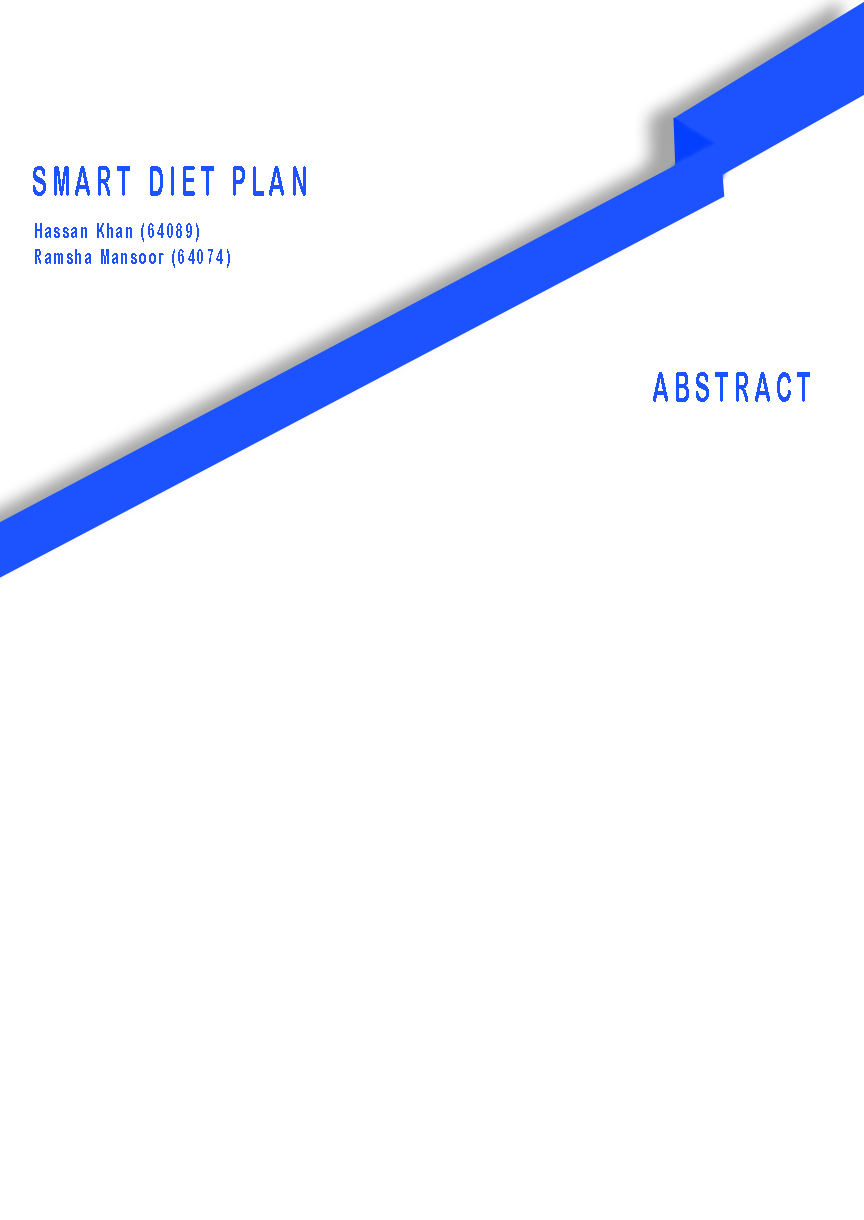
<style>
.page{position:relative;width:864px;height:1220px;background:#ffffff}
.page>*{position:absolute;margin:0}
.t1{font:42px "ArialRoundedMTBold";letter-spacing:0.23em;color:#1d52ff;scale:0.53 1}
.t2{font:21px "ArialRoundedMTBold";letter-spacing:0.23em;color:#1d52ff;scale:0.53 1}
</style>
<div class="page">
<p class="t1" style="left:33px;top:166px;width:273px;height:30px">SMART DIET PLAN</p>
<p class="t2" style="left:35px;top:223px;width:164px;height:19px">Hassan Khan (64089)</p>
<p class="t2" style="left:35px;top:249px;width:195px;height:19px">Ramsha Mansoor (64074)</p>
<p class="t1" style="left:653px;top:372px;width:157px;height:30px">ABSTRACT</p>
</div>
